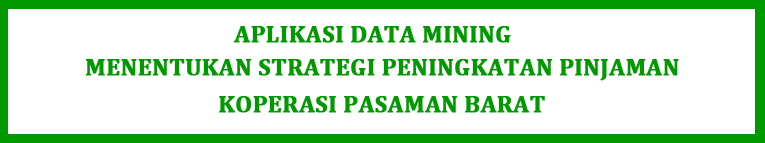
<style>
.page{position:relative;width:765px;height:143px;background:#ffffff}
.page>*{position:absolute;margin:0}
.t1{font:24px "Cambria-Bold";color:#009900;font-weight:bold}
</style>
<div class="page">
<p class="t1" style="left:233px;top:26px;width:278px;height:17px">APLIKASI DATA MINING</p>
<p class="t1" style="left:86px;top:59px;width:593px;height:22px">MENENTUKAN STRATEGI PENINGKATAN PINJAMAN</p>
<p class="t1" style="left:219px;top:96px;width:326px;height:17px">KOPERASI PASAMAN BARAT</p>
</div>
